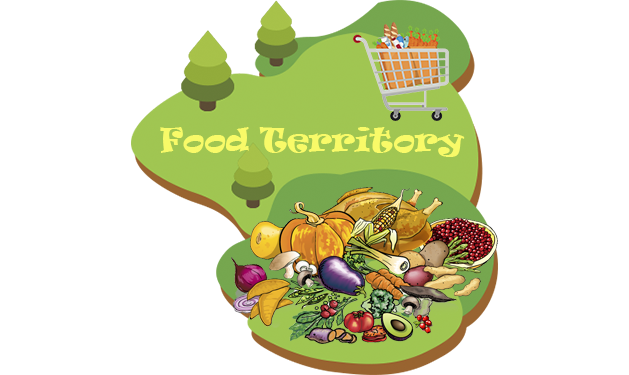
<style>
.page{position:relative;width:629px;height:375px;background:#ffffff}
.page>*{position:absolute;margin:0}
.t1{font:30px "Ravie";color:#f8fa68}
</style>
<div class="page">
<p class="t1" style="left:160px;top:127px;width:305px;height:30px">Food Territory</p>
</div>
